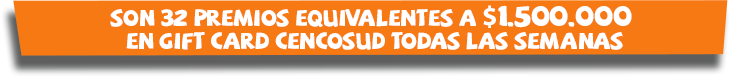
<style>
.page{position:relative;width:730px;height:77px;background:#f67914}
.page>*{position:absolute;margin:0}
.t1{font:23px/22.7px "SAF";letter-spacing:-0.01em;color:#ffffff}
.t2{font:28px/22.7px "MyriadPro-Bold";letter-spacing:-0.01em;color:#ffffff}
.t3{font:28px/22.7px "SAF";letter-spacing:-0.01em;color:#ffffff}
</style>
<div class="page">
<p class="t1" style="left:110px;top:5px;width:522px;height:45px;text-align:center">son 32 premios equivalentes a <span class="t2">$</span><span class="t3">1.500.000 <br></span>en gift card cencosud todas las semanas</p>
</div>
